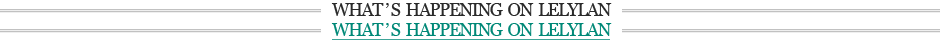
<style>
.page{position:relative;width:940px;height:40px;background:#ffffff}
.page>*{position:absolute;margin:0}
.t1{font:18px "Georgia";letter-spacing:-0.075em;color:#2a2a2a}
.t2{font:18px "Georgia";letter-spacing:-0.075em;color:#008877;text-decoration:underline}
</style>
<div class="page">
<p class="t1" style="left:331px;top:3px;width:281px;height:13px">WHAT ’ S  HAPPENING  ON  LELYLAN</p>
<p class="t2" style="left:331px;top:23px;width:281px;height:18px">WHAT ’ S  HAPPENING  ON  LELYLAN</p>
</div>
